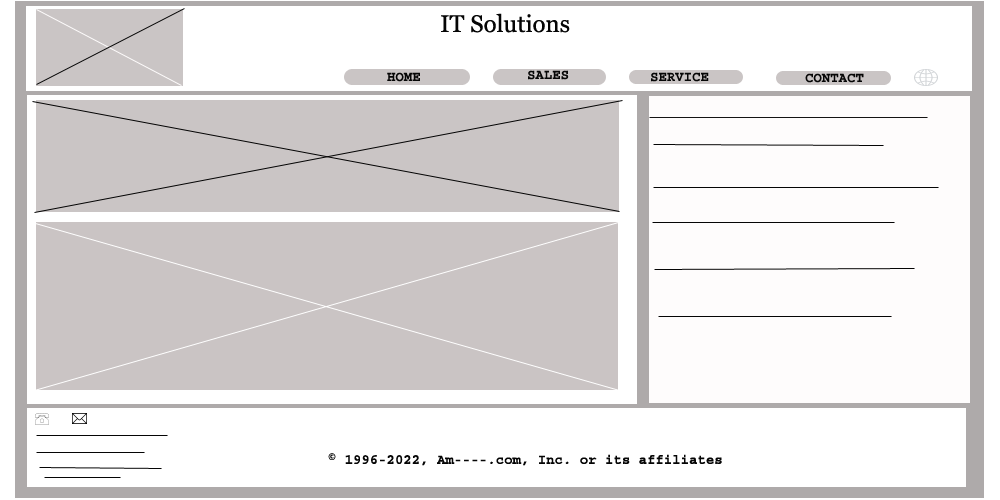
<style>
.page{position:relative;width:1000px;height:500px;background:#ffffff}
.page>*{position:absolute;margin:0}
.t1{font:24px "Georgia";color:#050505}
.t2{font:18px "Courier-Bold";color:#050505}
.t3{font:14px "Courier-Bold";color:#060606}
.t4{font:14px "Courier-Bold";color:#050505}
</style>
<div class="page">
<p class="t1" style="left:441px;top:13px;width:129px;height:20px"><span class="t2">       </span>  IT Solutions</p>
<p class="t3" style="left:387px;top:72px;width:33px;height:10px">HOME</p>
<p class="t3" style="left:528px;top:70px;width:41px;height:10px">SALES</p>
<p class="t3" style="left:651px;top:72px;width:58px;height:10px">SERVICE</p>
<p class="t3" style="left:805px;top:73px;width:59px;height:10px">CONTACT</p>
<p class="t4" style="left:328px;top:453px;width:394px;height:13px">© 1996-2022, Am----.com, Inc. or its affiliates</p>
</div>
